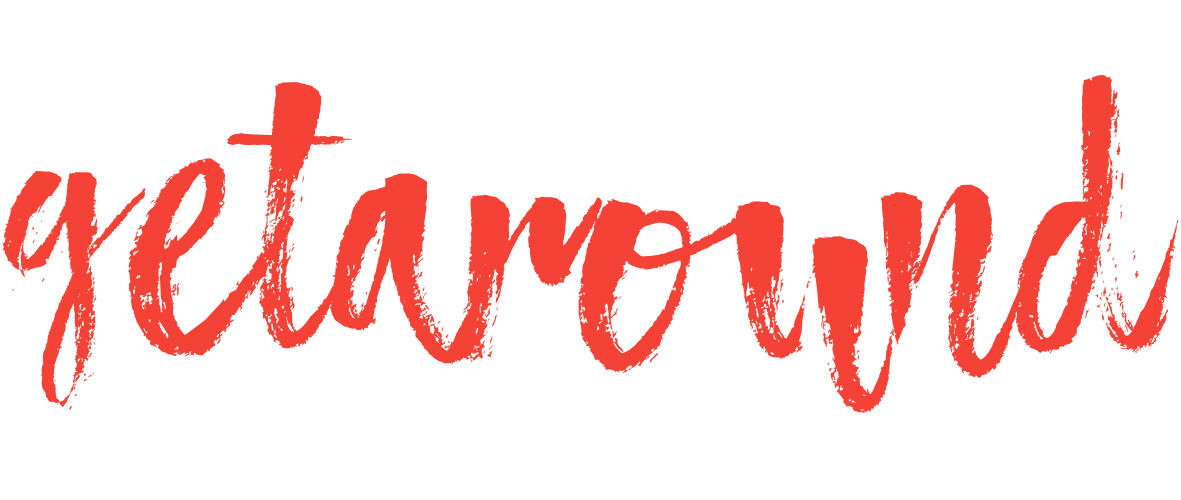
<style>
.page{position:relative;width:1181px;height:500px;background:#ffffff}
.page>*{position:absolute;margin:0}
.t1{font:341.7px "AtmosphereScriptTypeface";color:#f44336}
</style>
<div class="page">
<p class="t1" style="left:2px;top:74px;width:1177px;height:339px">getaround</p>
</div>
